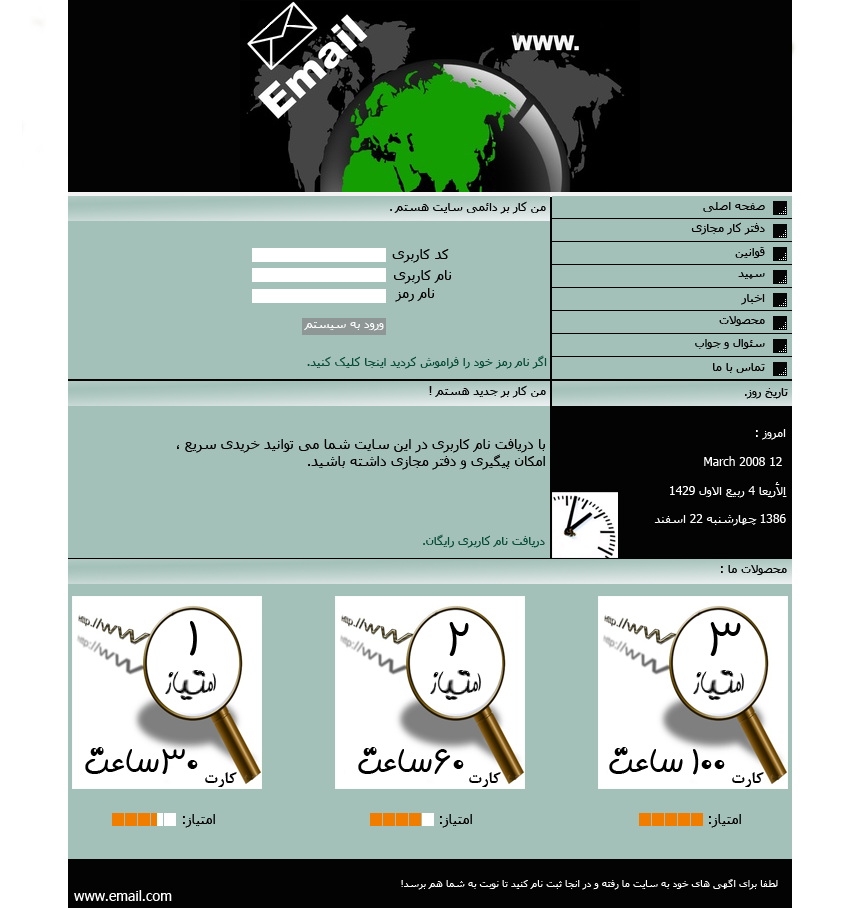
<style>
.page{position:relative;width:850px;height:908px;background:#a4c1b9}
.page>*{position:absolute;margin:0}
.t1{font:12px "Tahoma"}
.t2{font:12px "Tahoma";color:#000000}
.t3{font:14px "Tahoma";color:#000000}
.t4{font:12px "Tahoma";color:#030303}
.t5{font:14px "Tahoma";color:#010101}
.t6{font:12px "Tahoma";color:#010101}
.t7{font:12px "Tahoma";color:#fdfefe}
.t8{font:12px "Tahoma";color:#064b35}
.t9{font:12px "Tahoma";color:#ffffff}
.t10{font:48px "BMorvarid";color:#000000}
.t11{font:48px "BMorvarid";color:#010101}
.t12{font:48px "BMorvarid";color:#010100}
.t13{font:36px "BMorvarid";color:#010000}
.t14{font:18px "BNazaninBold";color:#010000}
.t15{font:10px "Tahoma";color:#ffffff}
.t16{font:14px "Tahoma";color:#ffffff}
</style>
<div class="page">
<p class="t1" style="left:390px;top:209px;width:2px;height:2px">.</p>
<p class="t2" style="left:394px;top:201px;width:152px;height:13px">من کار بر دائمی سایت هستم</p>
<p class="t2" style="left:703px;top:202px;width:62px;height:10px">صفحه اصلی</p>
<p class="t2" style="left:691px;top:222px;width:74px;height:13px">دفتر کار مجازی</p>
<p class="t3" style="left:392px;top:249px;width:57px;height:14px">کد کاربری</p>
<p class="t2" style="left:735px;top:247px;width:30px;height:11px">قوانین</p>
<p class="t3" style="left:394px;top:270px;width:57px;height:14px">نام کاربری</p>
<p class="t4" style="left:738px;top:272px;width:27px;height:7px">سپید</p>
<p class="t5" style="left:395px;top:288px;width:39px;height:14px">نام رمز</p>
<p class="t6" style="left:741px;top:294px;width:24px;height:11px">اخبار</p>
<p class="t2" style="left:719px;top:316px;width:46px;height:10px">محصولات</p>
<p class="t7" style="left:304px;top:322px;width:80px;height:9px">ورود به سیستم</p>
<p class="t2" style="left:695px;top:339px;width:70px;height:10px">سئوال و جواب</p>
<p class="t8" style="left:307px;top:355px;width:240px;height:14px">اگر نام رمز خود را فراموش کردید اینجا کلیک کنید.</p>
<p class="t2" style="left:713px;top:363px;width:52px;height:10px">تماس با ما</p>
<p class="t2" style="left:429px;top:385px;width:117px;height:13px">من کار بر جدید هستم !</p>
<p class="t2" style="left:745px;top:388px;width:43px;height:11px">تاریخ روز.</p>
<p class="t9" style="left:654px;top:429px;width:133px;height:97px">امروز :<br> <br> 12 March 2008 <br><br>اِلأَربِعا 4 ربيع الاول 1429 <br><br>1386 چهارشنبه 22 اسفند</p>
<p class="t3" style="left:177px;top:439px;width:368px;height:31px">با دریافت نام کاربری در این سایت شما می توانيد خریدی سریع ، <br>امکان پيگيری و دفتر مجازی داشته باشيد.</p>
<p class="t8" style="left:423px;top:534px;width:122px;height:14px">دریافت نام کاربری رایگان.</p>
<p class="t2" style="left:721px;top:565px;width:66px;height:10px">محصولات ما :</p>
<p class="t10" style="left:190px;top:621px;width:7px;height:35px">1</p>
<p class="t11" style="left:449px;top:622px;width:20px;height:34px">2</p>
<p class="t12" style="left:710px;top:622px;width:31px;height:34px">3</p>
<p class="t13" style="left:85px;top:747px;width:113px;height:27px">30ساعت</p>
<p class="t13" style="left:358px;top:747px;width:106px;height:27px">60ساعت</p>
<p class="t13" style="left:609px;top:747px;width:116px;height:28px">100 ساعت</p>
<p class="t14" style="left:205px;top:772px;width:32px;height:15px">کارت</p>
<p class="t14" style="left:469px;top:772px;width:32px;height:15px">کارت</p>
<p class="t14" style="left:732px;top:772px;width:32px;height:15px">کارت</p>
<p class="t3" style="left:183px;top:814px;width:32px;height:14px">امتیاز:</p>
<p class="t3" style="left:440px;top:814px;width:32px;height:14px">امتیاز:</p>
<p class="t3" style="left:709px;top:814px;width:32px;height:14px">امتیاز:</p>
<p class="t15" style="left:401px;top:879px;width:377px;height:11px">لطفا برای اگهی های خود به سایت ما رفته و در انجا ثبت نام کنید تا نوبت به شما هم برسد!</p>
<p class="t16" style="left:74px;top:890px;width:98px;height:11px">www.email.com</p>
</div>
